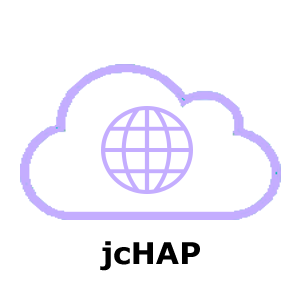
<style>
.page{position:relative;width:300px;height:300px;background:#ffffff}
.page>*{position:absolute;margin:0}
.t1{font:30px "Verdana-Bold";color:#000000}
</style>
<div class="page">
<p class="t1" style="left:100px;top:241px;width:100px;height:30px">jcHAP</p>
</div>
